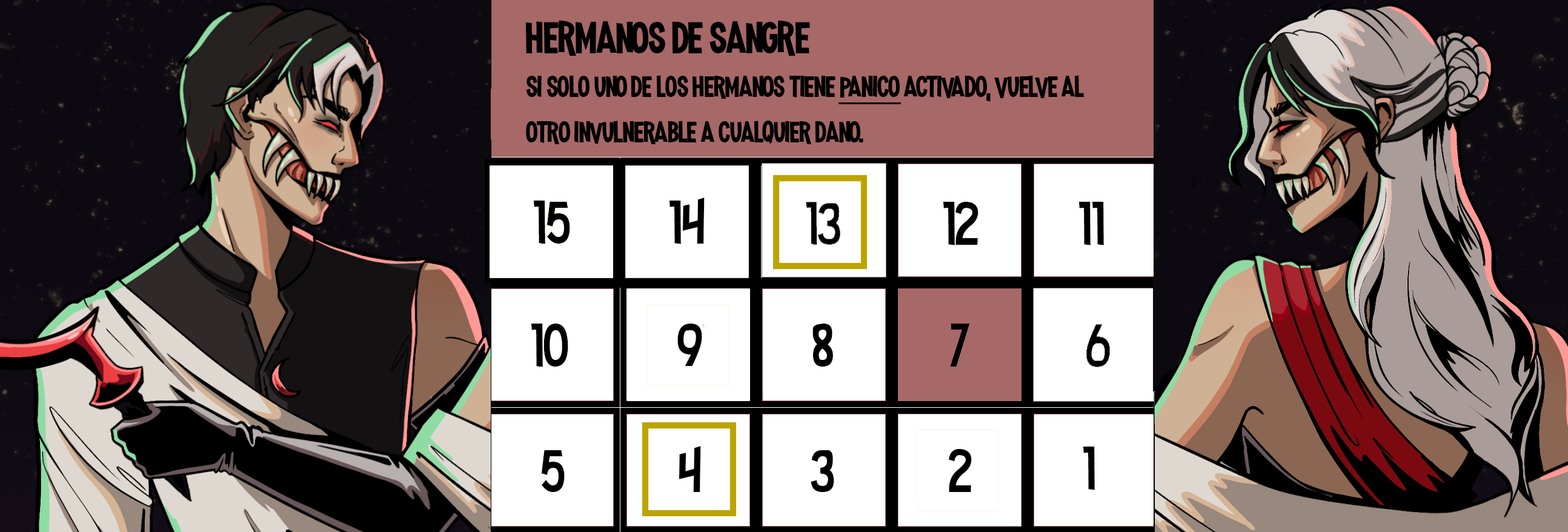
<style>
.page{position:relative;width:1568px;height:532px}
.page>*{position:absolute;margin:0}
.t1{font:57.8px "MadnessHyperactive";color:#000000}
.t2{font:38.1px "MadnessHyperactive";color:#000000}
</style>
<div class="page">
<p class="t1" style="left:525px;top:21px;width:285px;height:35px">hermanos de sangre</p>
<p class="t2" style="left:526px;top:75px;width:558px;height:69px">si solo uno de los hermanos tiene panico activado, vuelve al<br>otro invulnerable a cualquier dano.</p>
</div>
